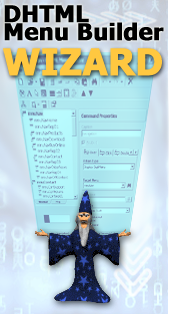
<style>
.page{position:relative;width:169px;height:314px}
.page>*{position:absolute;margin:0}
.t1{font:23px/18px "Tahoma-Bold";color:#000000;font-weight:bold}
.t2{font:36px "Tahoma-Bold";color:#ffc840;font-weight:bold}
</style>
<div class="page">
<p class="t1" style="left:4px;top:5px;width:160px;height:36px">DHTML<br>Menu Builder</p>
<p class="t2" style="left:3px;top:48px;width:159px;height:28px">WIZARD</p>
</div>
